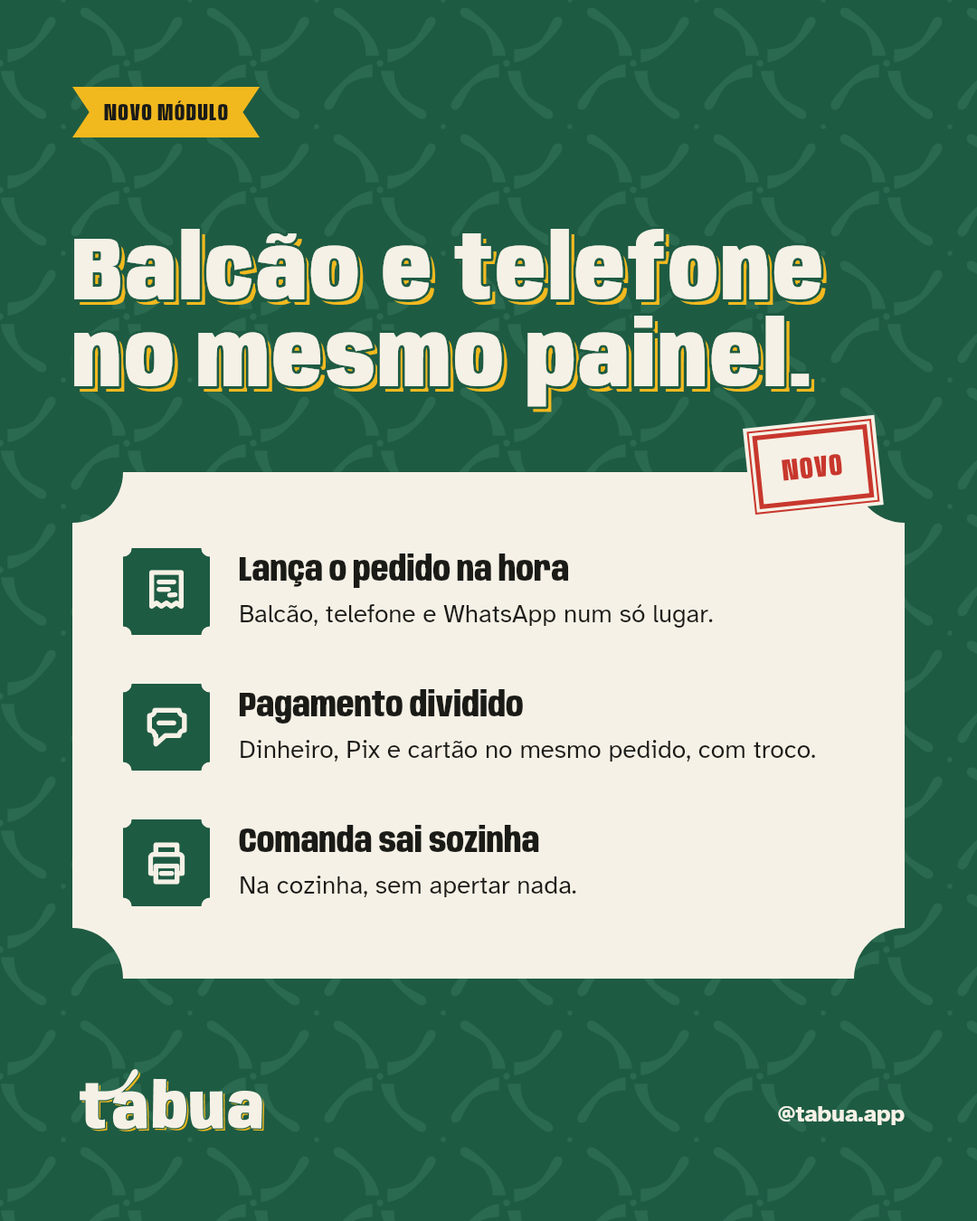
<style>
.page{position:relative;width:977px;height:1221px;background:#1e5b43}
.page>*{position:absolute;margin:0}
.t1{font:24.4px "Anybody-ExtraBold-W60";letter-spacing:0.06em;color:#1a1a17}
.t2{font:90.4px/86.8px "Anybody-Black-W75";letter-spacing:0.034em;color:#f6f1e6}
.t3{font:90.4px/86.8px "Anybody-Black-W75";letter-spacing:0.034em}
.t4{font:30.7px "Anybody-ExtraBold-W60";letter-spacing:0.06em;color:#c8372d}
.t5{font:34.4px "Anybody-ExtraBold-W75";color:#1a1a17}
.t6{font:25.3px "AtkinsonHyperlegible-Regular";color:#1a1a17}
.t7{font:23.5px "AtkinsonHyperlegible-Bold";color:#f6f1e6}
</style>
<div class="page">
<p class="t1" style="left:104px;top:100px;width:124px;height:20px">NOVO MÓDULO</p>
<p class="t2" style="left:71px;top:226px;width:753px;height:184px">Balcão e telefone<br>no mesmo painel.</p>
<p class="t3" style="left:80px;top:234px;width:747px;height:178px">Balcão e telefone<br>no mesmo painel.</p>
<p class="t4" style="left:781px;top:454px;width:61px;height:27px;rotate:-6deg">NOVO</p>
<p class="t5" style="left:239px;top:553px;width:330px;height:35px">Lança o pedido na hora</p>
<p class="t6" style="left:241px;top:604px;width:472px;height:24px">Balcão, telefone e WhatsApp num só lugar.</p>
<p class="t5" style="left:239px;top:689px;width:284px;height:34px">Pagamento dividido</p>
<p class="t6" style="left:241px;top:740px;width:574px;height:21px">Dinheiro, Pix e cartão no mesmo pedido, com troco.</p>
<p class="t5" style="left:239px;top:825px;width:300px;height:27px">Comanda sai sozinha</p>
<p class="t6" style="left:241px;top:875px;width:335px;height:22px">Na cozinha, sem apertar nada.</p>
<p class="t7" style="left:778px;top:1106px;width:126px;height:19px">@tabua.app</p>
</div>
